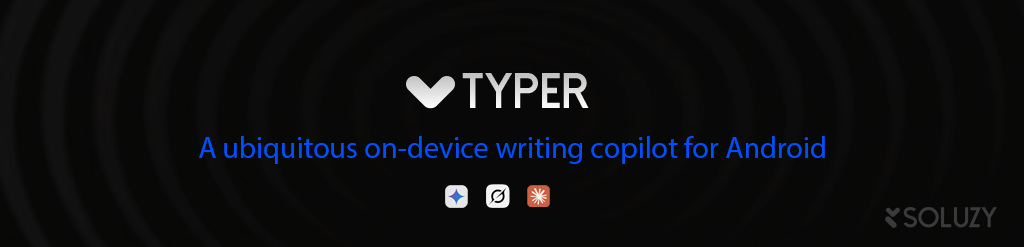
<style>
.page{position:relative;width:1024px;height:247px;background:#080808}
.page>*{position:absolute;margin:0}
.t1{font:29.9px "MyriadPro-Regular";color:#004efc}
</style>
<div class="page">
<p class="t1" style="left:199px;top:136px;width:626px;height:28px">A ubiquitous on-device writing copilot for Android</p>
</div>
